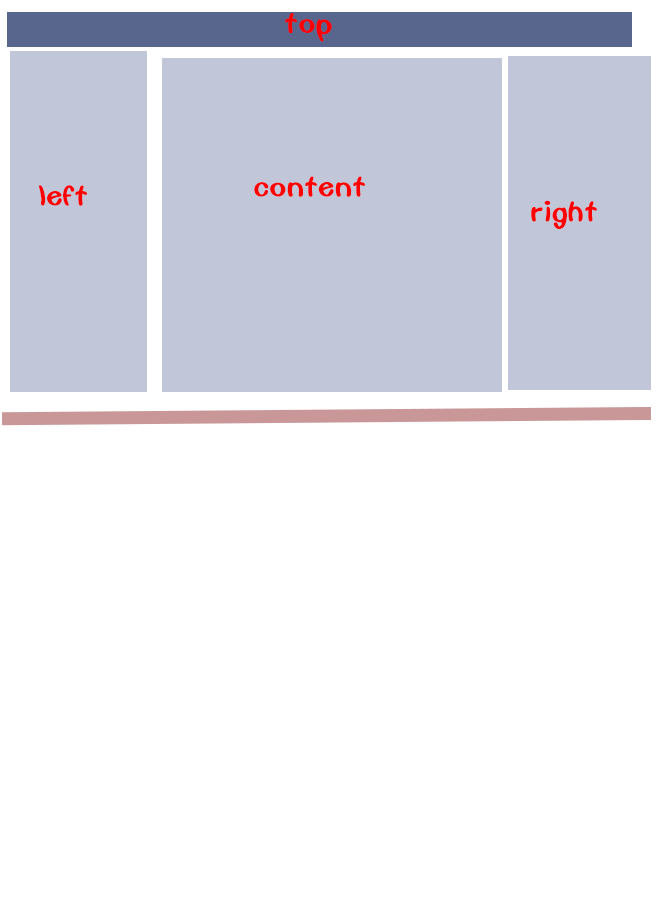
<style>
.page{position:relative;width:663px;height:904px;background:#ffffff}
.page>*{position:absolute;margin:0}
.t1{font:33.3px "FZSEJW--GB1-0";color:#ff0000}
</style>
<div class="page">
<p class="t1" style="left:285px;top:13px;width:47px;height:29px">top</p>
<p class="t1" style="left:39px;top:185px;width:48px;height:21px">left</p>
<p class="t1" style="left:254px;top:176px;width:111px;height:21px">content</p>
<p class="t1" style="left:531px;top:200px;width:66px;height:29px">right</p>
</div>
